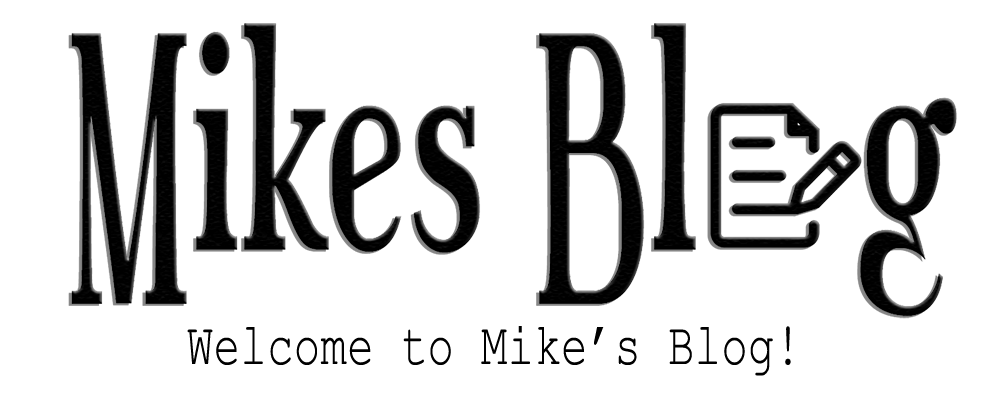
<style>
.page{position:relative;width:1000px;height:406px;background:#ffffff}
.page>*{position:absolute;margin:0}
.t1{font:60px "CourierNewPSMT";letter-spacing:0.01em;color:#000000;scale:0.73 1}
</style>
<div class="page">
<p class="t1" style="left:187px;top:326px;width:604px;height:50px">Welcome to Mike’s Blog!</p>
</div>
